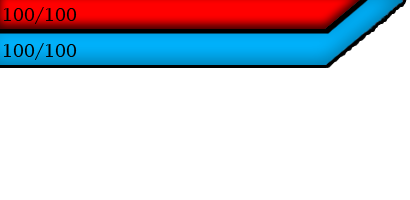
<style>
.page{position:relative;width:410px;height:200px;background:#ffffff}
.page>*{position:absolute;margin:0}
.t1{font:18px "LucidaBright";color:#000000}
</style>
<div class="page">
<p class="t1" style="left:4px;top:7px;width:73px;height:17px">100/100</p>
<p class="t1" style="left:4px;top:43px;width:73px;height:17px">100/100</p>
</div>
